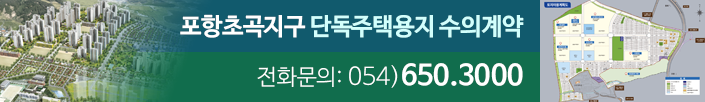
<style>
.page{position:relative;width:705px;height:102px;background:#116d4d}
.page>*{position:absolute;margin:0}
.t1{font:24px "NanumBarunGothicOTFBold";letter-spacing:-0.025em;color:#d2fffc}
.t2{font:24px "NanumBarunGothicOTFBold";letter-spacing:-0.025em;color:#ffffff}
.t3{font:28px "NanumBarunGothicOTFBold";color:#ffffff}
.t4{font:22px "NanumBarunGothicOTFLight";color:#ffffff}
.t5{font:24px "NanumBarunGothicOTFLight";color:#ffffff}
</style>
<div class="page">
<p class="t1" style="left:180px;top:14px;width:344px;height:24px"><span class="t2">포항초곡지구 </span>단독주택용지 수의계약</p>
<p class="t3" style="left:257px;top:63px;width:266px;height:25px"><span class="t4">전화문의:</span><span class="t5"> 054)</span>650.3000</p>
</div>
